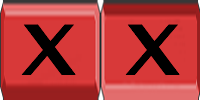
<style>
.page{position:relative;width:200px;height:100px;background:#d83939}
.page>*{position:absolute;margin:0}
.t1{font:72px "MyanmarMN-Bold";color:#000000}
</style>
<div class="page">
<p class="t1" style="left:21px;top:24px;width:55px;height:51px">X</p>
<p class="t1" style="left:125px;top:24px;width:55px;height:51px">X</p>
</div>
